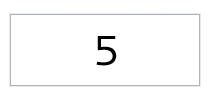
<style>
.page{position:relative;width:210px;height:100px;background:#ffffff}
.page>*{position:absolute;margin:0}
.t1{font:41.7px "Cantarell-Regular";color:#000000}
</style>
<div class="page">
<p class="t1" style="left:96px;top:36px;width:21px;height:30px">5</p>
</div>
